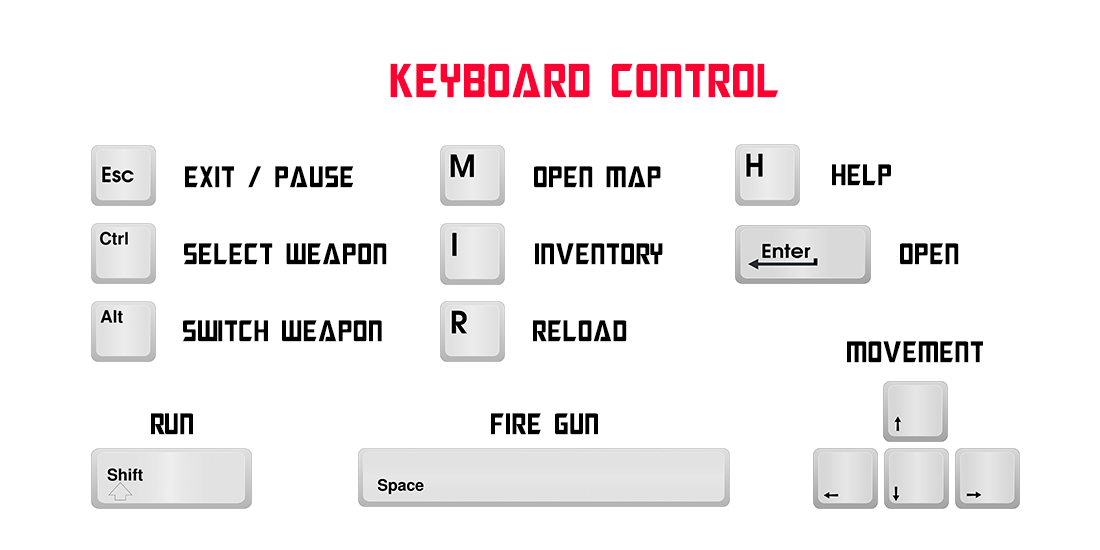
<style>
.page{position:relative;width:1100px;height:550px;background:#ffffff}
.page>*{position:absolute;margin:0}
.t1{font:48px "MegatronCondensed";color:#ff0033}
.t2{font:30px "MegatronCondensed";color:#000000}
</style>
<div class="page">
<p class="t1" style="left:390px;top:63px;width:389px;height:35px">keyboard COntrol</p>
<p class="t2" style="left:185px;top:166px;width:169px;height:22px">EXit / pause</p>
<p class="t2" style="left:534px;top:166px;width:127px;height:22px">open map</p>
<p class="t2" style="left:832px;top:164px;width:59px;height:22px">help</p>
<p class="t2" style="left:184px;top:243px;width:203px;height:22px">select weapon</p>
<p class="t2" style="left:535px;top:243px;width:128px;height:22px">inventory</p>
<p class="t2" style="left:900px;top:243px;width:59px;height:22px">open</p>
<p class="t2" style="left:183px;top:320px;width:199px;height:22px">SWitch weapon</p>
<p class="t2" style="left:533px;top:320px;width:94px;height:22px">reload</p>
<p class="t2" style="left:847px;top:341px;width:136px;height:22px">movement</p>
<p class="t2" style="left:151px;top:413px;width:42px;height:22px">run</p>
<p class="t2" style="left:491px;top:413px;width:107px;height:22px">fire gun</p>
</div>
